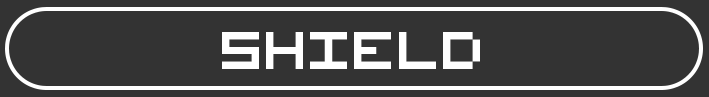
<style>
.page{position:relative;width:709px;height:97px;background:#333333}
.page>*{position:absolute;margin:0}
.t1{font:73.7px "VisitorTT1BRK";color:#ffffff}
</style>
<div class="page">
<p class="t1" style="left:222px;top:32px;width:258px;height:37px">SHIELD</p>
</div>
